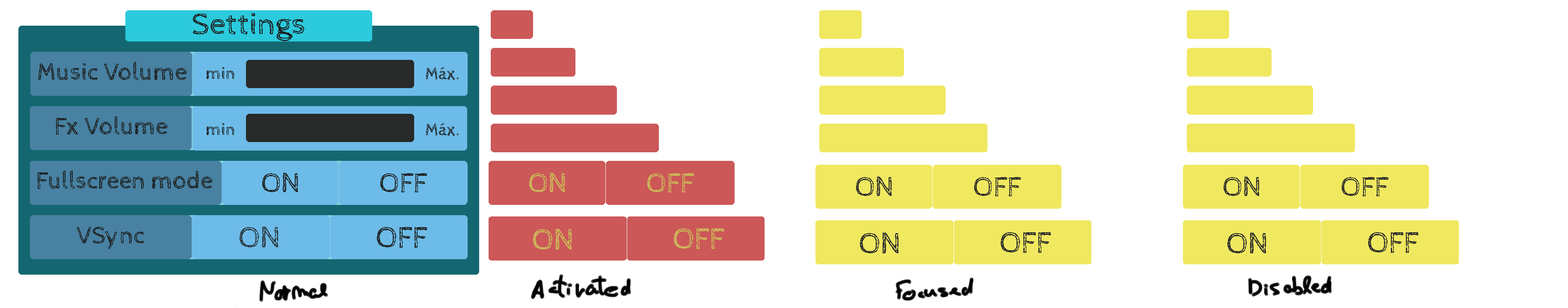
<style>
.page{position:relative;width:1568px;height:308px;background:#ffffff}
.page>*{position:absolute;margin:0}
.t1{font:30.6px "CabinSketch-Regular";color:#1c2020;scale:1.05 1}
.t2{font:24.3px "CabinSketch-Regular";color:#1c2020}
.t3{font:17.1px "CabinSketch-Regular";color:#1c2020}
.t4{font:27.8px "CabinSketch-Regular";color:#1c2020}
.t5{font:27.8px "CabinSketch-Regular";color:#ccbd58}
.t6{font:27.8px "CabinSketch-Regular";color:#282929}
.t7{font:29.9px "CabinSketch-Regular";color:#2a3a41}
.t8{font:29.9px "CabinSketch-Regular";color:#1c2020}
.t9{font:29.9px "CabinSketch-Regular";color:#ccbd58}
.t10{font:29.9px "CabinSketch-Regular";color:#282929}
</style>
<div class="page">
<p class="t1" style="left:193px;top:13px;width:111px;height:28px">Settings</p>
<p class="t2" style="left:38px;top:62px;width:149px;height:18px">Music Volume</p>
<p class="t3" style="left:207px;top:67px;width:27px;height:12px">min</p>
<p class="t3" style="left:426px;top:67px;width:32px;height:13px">Máx.</p>
<p class="t2" style="left:56px;top:116px;width:111px;height:19px">Fx Volume</p>
<p class="t3" style="left:207px;top:123px;width:27px;height:12px">min</p>
<p class="t3" style="left:426px;top:123px;width:32px;height:13px">Máx.</p>
<p class="t2" style="left:38px;top:171px;width:174px;height:18px">Fullscreen mode</p>
<p class="t4" style="left:262px;top:173px;width:36px;height:19px">ON</p>
<p class="t4" style="left:380px;top:173px;width:47px;height:20px">OFF</p>
<p class="t5" style="left:529px;top:173px;width:36px;height:19px">ON</p>
<p class="t5" style="left:647px;top:173px;width:47px;height:20px">OFF</p>
<p class="t6" style="left:856px;top:177px;width:36px;height:19px">ON</p>
<p class="t6" style="left:974px;top:177px;width:47px;height:19px">OFF</p>
<p class="t6" style="left:1224px;top:177px;width:35px;height:19px">ON</p>
<p class="t6" style="left:1342px;top:177px;width:46px;height:19px">OFF</p>
<p class="t2" style="left:77px;top:227px;width:67px;height:22px">VSync</p>
<p class="t7" style="left:240px;top:227px;width:38px;height:20px">ON</p>
<p class="t8" style="left:377px;top:227px;width:50px;height:21px">OFF</p>
<p class="t9" style="left:533px;top:229px;width:39px;height:20px">ON</p>
<p class="t9" style="left:674px;top:228px;width:50px;height:21px">OFF</p>
<p class="t10" style="left:860px;top:233px;width:38px;height:20px">ON</p>
<p class="t10" style="left:1001px;top:232px;width:50px;height:21px">OFF</p>
<p class="t10" style="left:1227px;top:233px;width:39px;height:20px">ON</p>
<p class="t10" style="left:1368px;top:232px;width:50px;height:21px">OFF</p>
</div>
